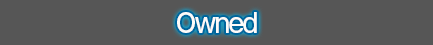
<style>
.page{position:relative;width:433px;height:45px;background:#565656}
.page>*{position:absolute;margin:0}
.t1{font:26px "GothicMB101Pro-Medium";letter-spacing:-0.08em;color:#fdfbf9;scale:0.9 1}
</style>
<div class="page">
<p class="t1" style="left:177px;top:12px;width:80px;height:21px">Owned</p>
</div>
